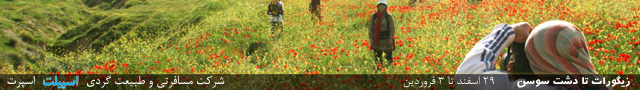
<style>
.page{position:relative;width:640px;height:90px}
.page>*{position:absolute;margin:0}
.t1{font:14px "BNazanin";color:#ffffff}
.t2{font:13px "BNazanin";color:#f2f2f2}
.t3{font:13px "B-aban";color:#ffffff}
</style>
<div class="page">
<p class="t1" style="left:7px;top:75px;width:218px;height:13px">شرکت مسافرتی و طبیعت گردی               اسپرت</p>
<p class="t2" style="left:403px;top:76px;width:91px;height:12px">29 اسفند تا 3 فروردین</p>
<p class="t3" style="left:517px;top:75px;width:113px;height:13px">زیگورات تا دشت سوسن</p>
</div>
